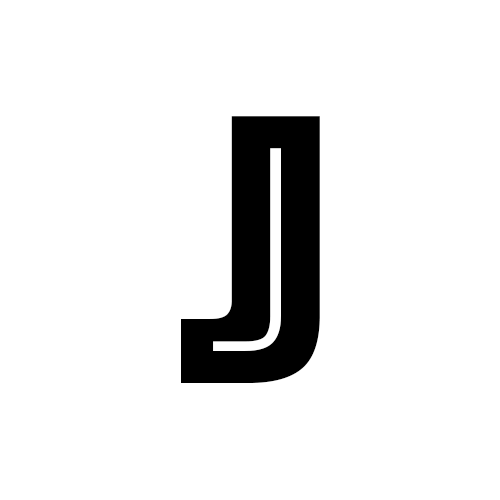
<style>
.page{position:relative;width:500px;height:500px;background:#ffffff}
.page>*{position:absolute;margin:0}
.t1{font:400px "Phosphate-Inline";color:#000000}
</style>
<div class="page">
<p class="t1" style="left:181px;top:116px;width:139px;height:267px">J</p>
</div>
